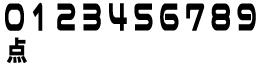
<style>
.page{position:relative;width:260px;height:66px;background:#ffffff}
.page>*{position:absolute;margin:0}
.t1{font:46.8px "NicoKaku";letter-spacing:0.18em;color:#000000;scale:0.57 1}
</style>
<div class="page">
<p class="t1" style="left:5px;top:2px;width:251px;height:29px">0123456789</p>
</div>
